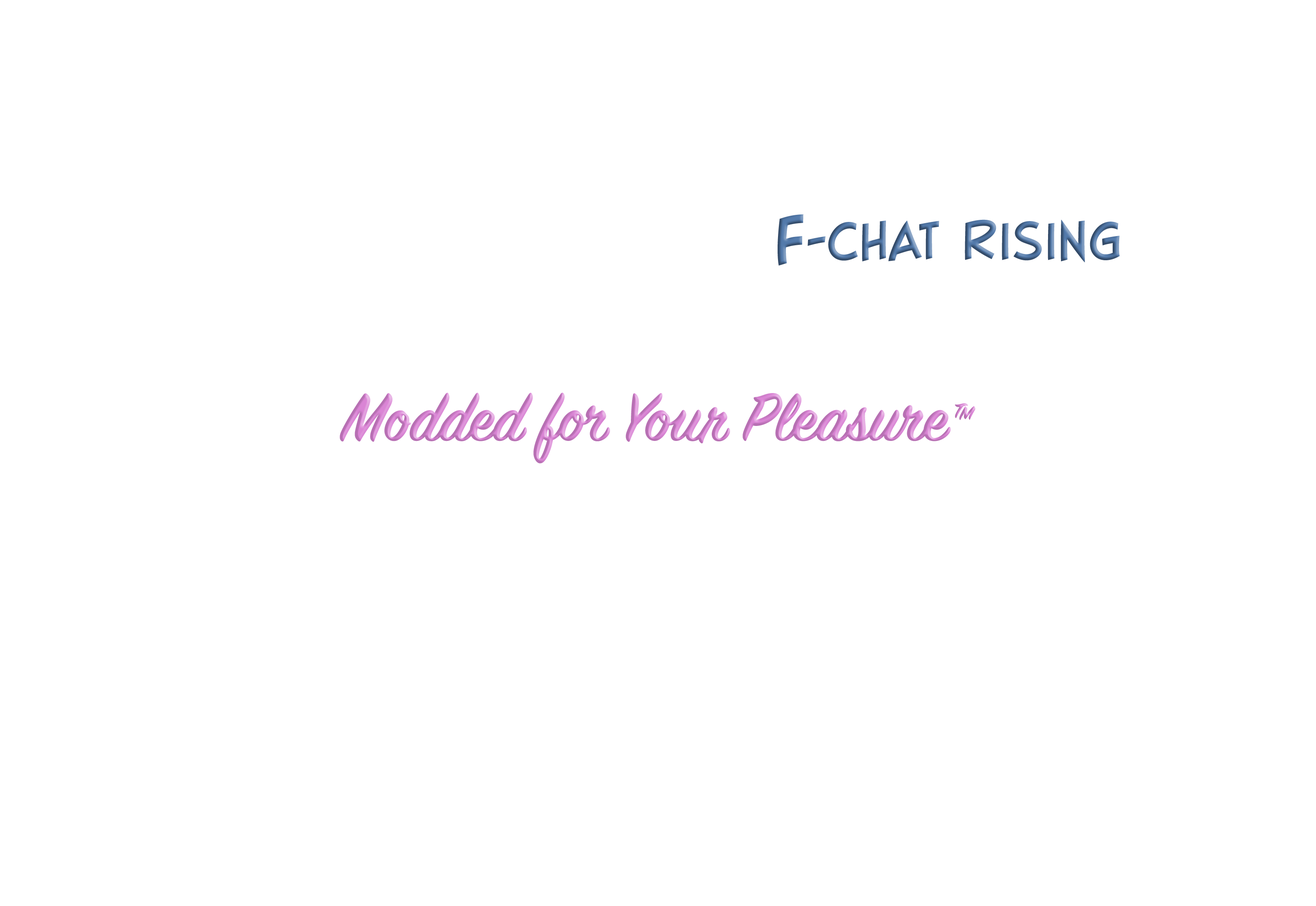
<style>
.page{position:relative;width:1316px;height:906px;background:#ffffff}
.page>*{position:absolute;margin:0}
.t1{font:75px "BlambotFXProLightBB";text-transform:uppercase}
.t2{font:104.1px "BlambotFXProLightBB";text-transform:uppercase}
.t3{font:75px "BlambotFXProLightBB";text-transform:uppercase;scale:0.7 1}
.t4{font:75px "SignPainter-HouseScriptSemibold"}
.t5{font:41.7px "SignPainter-HouseScript"}
</style>
<div class="page">
<p class="t1" style="left:777px;top:214px;width:342px;height:52px"><span class="t2">F</span><span class="t3">-</span>Chat Rising</p>
<p class="t4" style="left:339px;top:393px;width:636px;height:71px">Modded for Your Pleasure<span class="t5">™</span></p>
</div>
